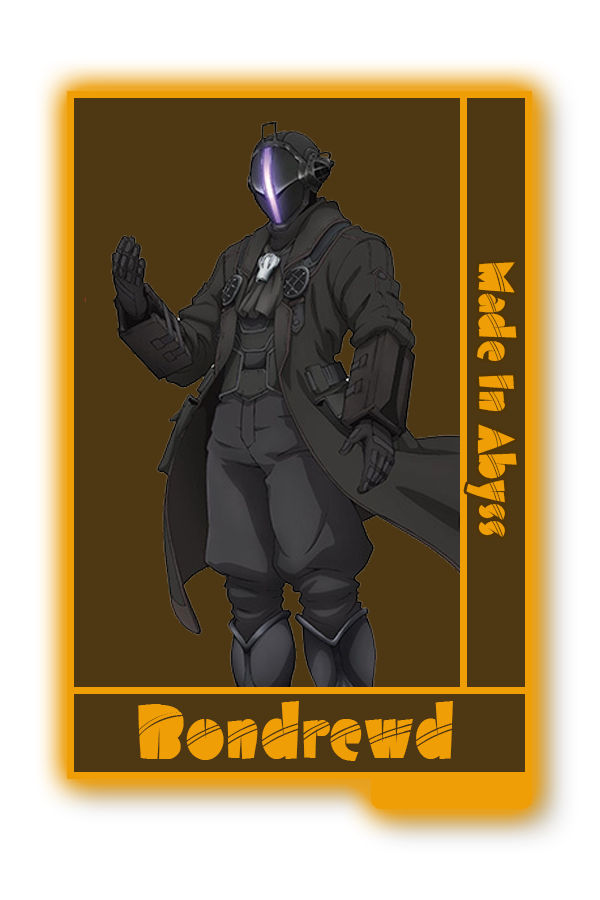
<style>
.page{position:relative;width:600px;height:900px;background:#4e3713}
.page>*{position:absolute;margin:0}
.t1{font:48.8px "AirmoleStripe";color:#f09e06}
.t2{font:75px "AirmoleStripe";color:#f09e06}
</style>
<div class="page">
<p class="t1" style="left:466px;top:262px;width:51px;height:275px;rotate:90deg">Made In Abyss</p>
<p class="t2" style="left:138px;top:701px;width:315px;height:60px">Bondrewd</p>
</div>
